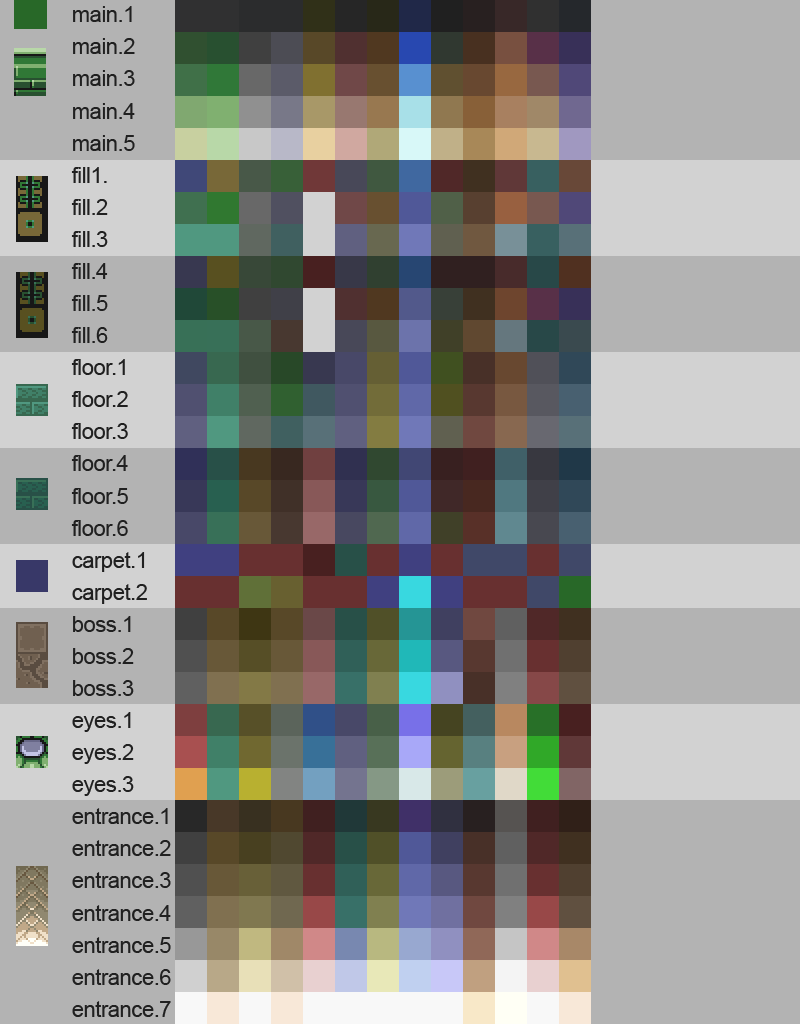
<style>
.page{position:relative;width:800px;height:1024px;background:#b3b3b3}
.page>*{position:absolute;margin:0}
.t1{font:22.2px/32.1px "ArialMT";letter-spacing:-0.025em;color:#202020}
</style>
<div class="page">
<p class="t1" style="left:71px;top:6px;width:100px;height:1011px">main.1<br>main.2<br>main.3<br>main.4<br>main.5<br>fill1.<br>fill.2<br>fill.3<br>fill.4<br>fill.5<br>fill.6<br>floor.1<br>floor.2<br>floor.3<br>floor.4<br>floor.5<br>floor.6<br>carpet.1<br>carpet.2<br>boss.1<br>boss.2<br>boss.3<br>eyes.1<br>eyes.2<br>eyes.3<br>entrance.1<br>entrance.2<br>entrance.3<br>entrance.4<br>entrance.5<br>entrance.6<br>entrance.7</p>
</div>
